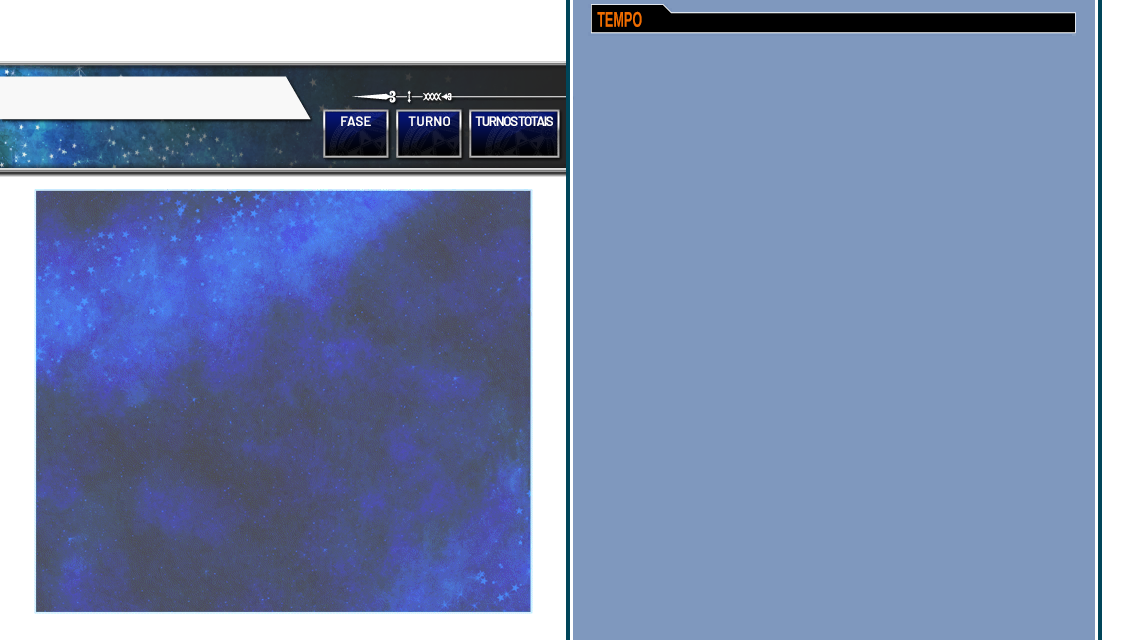
<style>
.page{position:relative;width:1136px;height:640px;background:#7f98be}
.page>*{position:absolute;margin:0}
.t1{font:21.3px "ArimoRoman-Bold";letter-spacing:0.015em;color:#f06e00;scale:0.58 1}
.t2{font:13.3px "Barlow-SemiBold";letter-spacing:0.015em;color:#ffffff}
.t3{font:13.3px "Barlow-SemiBold";letter-spacing:-0.1em;color:#ffffff}
</style>
<div class="page">
<p class="t1" style="left:597px;top:11px;width:45px;height:16px">TEMPO</p>
<p class="t2" style="left:341px;top:116px;width:30px;height:10px">FASE</p>
<p class="t2" style="left:408px;top:116px;width:42px;height:10px">TURNO</p>
<p class="t3" style="left:475px;top:116px;width:78px;height:10px">TURNOS TOTAIS</p>
</div>
